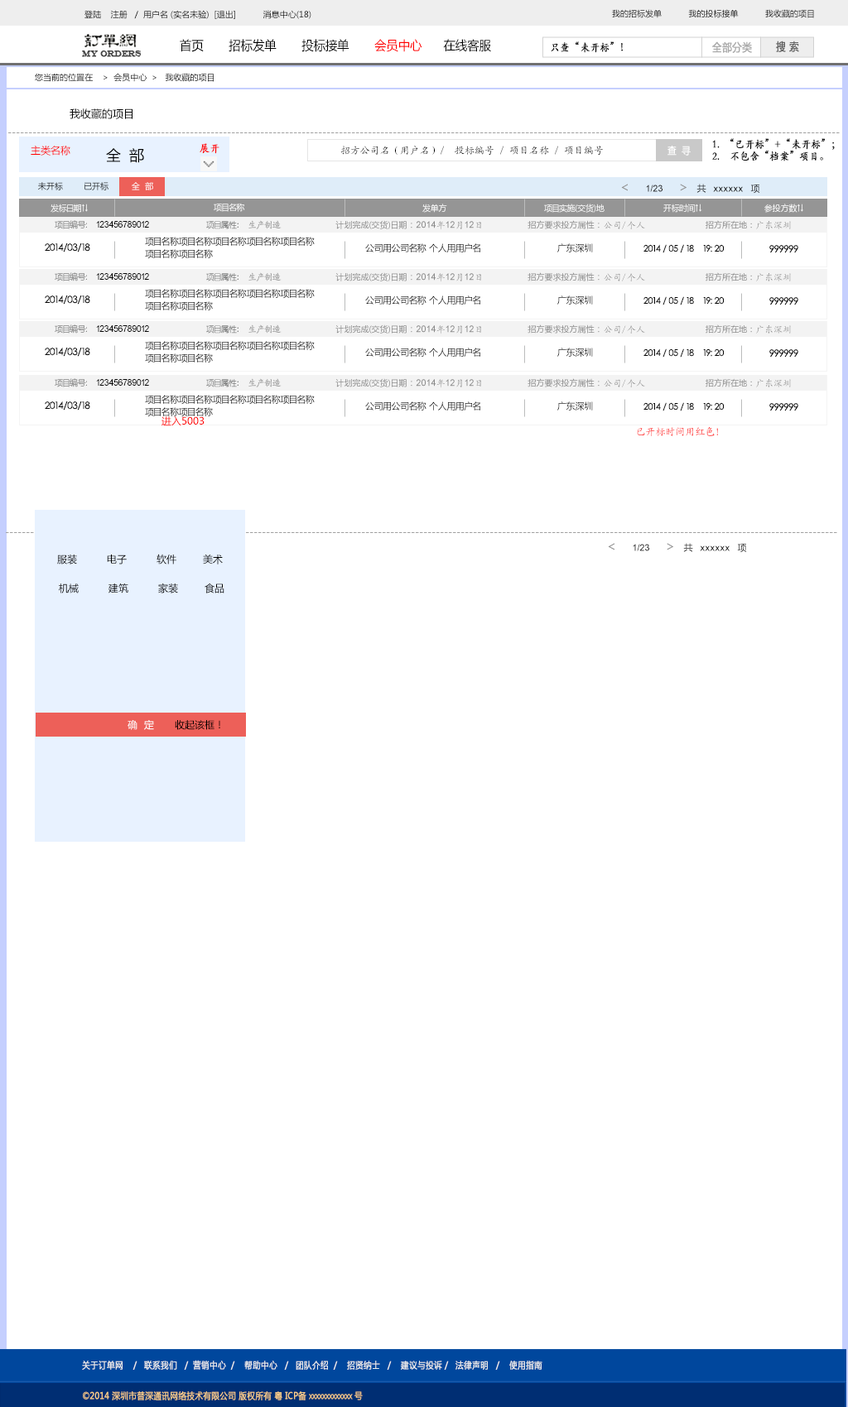
<style>
.page{position:relative;width:848px;height:1407px;background:#ffffff}
.page>*{position:absolute;margin:0}
.t1{font:8.3px "MicrosoftYaHei";color:#000000}
.t2{font:12.7px "MicrosoftYaHei";color:#000000;font-variant:small-caps;scale:0.94 1}
.t3{font:12.7px "MicrosoftYaHei";color:#ff0000;font-variant:small-caps;scale:0.94 1}
.t4{font:10.9px "STKaiti";color:#000000;font-variant:small-caps;font-weight:bold;scale:0.86 1}
.t5{font:10.9px "MicrosoftYaHei";color:#aaaaaa;font-variant:small-caps;font-weight:bold;scale:0.86 1}
.t6{font:10.9px "MicrosoftYaHei";color:#626262;font-variant:small-caps;font-weight:bold;scale:0.86 1}
.t7{font:8.2px "EngraversMT";color:#434343;font-variant:small-caps;font-weight:bold;scale:0.86 1}
.t8{font:10.8px "MicrosoftYaHei";color:#000000}
.t9{font:9.9px "MicrosoftYaHei";color:#a0a0a0}
.t10{font:9.9px "MicrosoftYaHei";color:#ff0000}
.t11{font:14.9px "MicrosoftYaHei";color:#000000}
.t12{font:10.9px "STKaiti";color:#ff0000;font-variant:small-caps;font-weight:bold;scale:0.86 1}
.t13{font:9.9px "KaiTi_GB2312";color:#000000}
.t14{font:10px "MicrosoftYaHei";color:#ffffff;font-variant:small-caps;font-weight:bold;scale:0.86 1}
.t15{font:8.3px "MicrosoftYaHei"}
.t16{font:8.4px "MicrosoftYaHei"}
.t17{font:9.1px "ArialMT"}
.t18{font:13.2px "MicrosoftYaHei"}
.t19{font:9.1px "MicrosoftYaHei"}
.t20{font:8.3px "MicrosoftYaHei";color:#ffffff}
.t21{font:9.1px "ArialMT";color:#000000}
.t22{font:8.3px "MicrosoftYaHei";color:#7a7b7b}
.t23{font:8.3px "YouYuan";color:#7a7b7b}
.t24{font:9.1px "YouYuan";color:#7a7b7b}
.t25{font:9.1px "STKaiti";color:#a0a0a0}
.t26{font:8.3px "MicrosoftYaHei";color:#898989}
.t27{font:9.1px "MicrosoftYaHei";color:#898989}
.t28{font:9.1px "ArialMT";color:#898989}
.t29{font:9.1px "STKaiti";color:#898989}
.t30{font:9.9px "STXihei";color:#040404}
.t31{font:13.2px "STXihei";color:#020202}
.t32{font:9.1px/12.4px "MicrosoftYaHei";color:#040404}
.t33{font:9.1px "MicrosoftYaHei";color:#040404}
.t34{font:9.1px "STXihei";color:#040404}
.t35{font:13.2px "STXihei";color:#040404}
.t36{font:9.9px "KaiTi_GB2312"}
.t37{font:9.9px "MicrosoftYaHei";color:#000000}
.t38{font:9.9px "MicrosoftYaHei";color:#ffffff}
.t39{font:9.1px "MicrosoftYaHei";color:#eeeeee;font-variant:small-caps;font-weight:bold;scale:0.86 1}
.t40{font:12.7px "STXihei";color:#eeeeee;font-variant:small-caps;font-weight:bold;scale:0.86 1}
.t41{font:9.1px "MicrosoftYaHei";color:#facd89;font-variant:small-caps;font-weight:bold;scale:0.87 1}
.t42{font:9.1px "MicrosoftYaHei";color:#eeeeee;font-variant:small-caps;font-weight:bold;scale:0.87 1}
</style>
<div class="page">
<p class="t1" style="left:84px;top:10px;width:227px;height:9px">登陆    注册   /  用户名 (实名未验)  [退出]           消息中心(18)</p>
<p class="t1" style="left:612px;top:9px;width:202px;height:9px">我的招标发单           我的投标接单           我收藏的项目</p>
<p class="t2" style="left:180px;top:39px;width:311px;height:13px">首页       招标发单       投标接单       <span class="t3">会员中心 </span>     在线客服</p>
<p class="t4" style="left:550px;top:41px;width:72px;height:12px">只查“未开标”！</p>
<p class="t5" style="left:712px;top:41px;width:39px;height:12px">全部分类</p>
<p class="t6" style="left:776px;top:41px;width:23px;height:11px">搜 索</p>
<p class="t7" style="left:82px;top:50px;width:60px;height:7px">MY ORDERS</p>
<p class="t1" style="left:35px;top:73px;width:179px;height:9px">您当前的位置在    &gt;  会员中心  &gt;   我收藏的项目</p>
<p class="t8" style="left:70px;top:108px;width:62px;height:11px">我收藏的项目</p>
<p class="t9" style="left:8px;top:132px;width:831px;height:1px">---------------------------------------------------------------------------------------------------------------------------------------------------------------------------------------------------------</p>
<p class="t10" style="left:31px;top:146px;width:39px;height:10px">主类名称</p>
<p class="t11" style="left:106px;top:148px;width:38px;height:15px">全  部</p>
<p class="t12" style="left:199px;top:143px;width:20px;height:11px">展开</p>
<p class="t13" style="left:340px;top:146px;width:263px;height:10px">招方公司名（用户名）/  投标编号 / 项目名称 / 项目编号</p>
<p class="t14" style="left:667px;top:146px;width:23px;height:10px">查  寻</p>
<p class="t4" style="left:712px;top:138px;width:122px;height:23px">1.  “已开标”+“未开标”；<br>2.    不包含“档案”项目。</p>
<p class="t15" style="left:38px;top:182px;width:25px;height:8px">未开标</p>
<p class="t16" style="left:84px;top:182px;width:24px;height:8px">已开标</p>
<p class="t16" style="left:132px;top:182px;width:21px;height:8px">全  部</p>
<p class="t17" style="left:621px;top:184px;width:139px;height:10px"><span class="t18">&lt;     </span>1/23     <span class="t18">&gt;  </span><span class="t19">共  </span>xxxxxx  <span class="t19">项</span></p>
<p class="t20" style="left:50px;top:204px;width:38px;height:9px">发标日期↑↓</p>
<p class="t20" style="left:214px;top:203px;width:31px;height:9px">项目名称</p>
<p class="t20" style="left:422px;top:204px;width:25px;height:9px">发单方</p>
<p class="t20" style="left:544px;top:204px;width:60px;height:9px">项目实施(交货)地</p>
<p class="t20" style="left:663px;top:204px;width:39px;height:9px">开标时间↑↓</p>
<p class="t20" style="left:764px;top:204px;width:39px;height:9px">参投方数↑↓</p>
<p class="t21" style="left:55px;top:220px;width:94px;height:9px"><span class="t22">项目编号:  </span>123456789012</p>
<p class="t23" style="left:206px;top:220px;width:75px;height:9px">项目属性<span class="t24">:  </span><span class="t25">生产制造</span></p>
<p class="t26" style="left:335px;top:220px;width:146px;height:10px">计划完成(交货)日期<span class="t27">：</span><span class="t28">2014</span><span class="t29">年</span><span class="t28">12</span><span class="t29">月</span><span class="t28">12</span><span class="t29">日</span></p>
<p class="t26" style="left:527px;top:220px;width:118px;height:9px">招方要求投方属性<span class="t27">：</span><span class="t29">公司/个人</span></p>
<p class="t26" style="left:705px;top:220px;width:85px;height:9px">招方所在地：<span class="t29">广东深圳</span></p>
<p class="t30" style="left:45px;top:243px;width:45px;height:9px"><span class="t31">   </span>2014/03/18</p>
<p class="t32" style="left:145px;top:237px;width:170px;height:22px">项目名称项目名称项目名称项目名称项目名称<br>项目名称项目名称</p>
<p class="t33" style="left:365px;top:243px;width:115px;height:9px">公司用公司名称 个人用用户名</p>
<p class="t33" style="left:557px;top:243px;width:36px;height:9px">广东深圳</p>
<p class="t34" style="left:643px;top:244px;width:80px;height:9px"><span class="t35"> </span>2014 / 05 / 18    19: 20</p>
<p class="t30" style="left:769px;top:245px;width:29px;height:8px"><span class="t35"> </span>999999</p>
<p class="t21" style="left:55px;top:272px;width:94px;height:9px"><span class="t22">项目编号:  </span>123456789012</p>
<p class="t23" style="left:206px;top:272px;width:75px;height:9px">项目属性<span class="t24">:  </span><span class="t25">生产制造</span></p>
<p class="t26" style="left:335px;top:272px;width:146px;height:10px">计划完成(交货)日期<span class="t27">：</span><span class="t28">2014</span><span class="t29">年</span><span class="t28">12</span><span class="t29">月</span><span class="t28">12</span><span class="t29">日</span></p>
<p class="t26" style="left:527px;top:272px;width:118px;height:9px">招方要求投方属性<span class="t27">：</span><span class="t29">公司/个人</span></p>
<p class="t26" style="left:705px;top:272px;width:85px;height:9px">招方所在地：<span class="t29">广东深圳</span></p>
<p class="t32" style="left:145px;top:289px;width:170px;height:22px">项目名称项目名称项目名称项目名称项目名称<br>项目名称项目名称</p>
<p class="t30" style="left:45px;top:295px;width:45px;height:10px"><span class="t31">   </span>2014/03/18</p>
<p class="t33" style="left:365px;top:295px;width:115px;height:10px">公司用公司名称 个人用用户名</p>
<p class="t33" style="left:557px;top:295px;width:36px;height:10px">广东深圳</p>
<p class="t34" style="left:643px;top:296px;width:80px;height:9px"><span class="t35"> </span>2014 / 05 / 18    19: 20</p>
<p class="t30" style="left:769px;top:297px;width:29px;height:8px"><span class="t35"> </span>999999</p>
<p class="t21" style="left:55px;top:324px;width:94px;height:10px"><span class="t22">项目编号:  </span>123456789012</p>
<p class="t23" style="left:206px;top:324px;width:75px;height:10px">项目属性<span class="t24">:  </span><span class="t25">生产制造</span></p>
<p class="t26" style="left:335px;top:324px;width:146px;height:10px">计划完成(交货)日期<span class="t27">：</span><span class="t28">2014</span><span class="t29">年</span><span class="t28">12</span><span class="t29">月</span><span class="t28">12</span><span class="t29">日</span></p>
<p class="t26" style="left:527px;top:324px;width:118px;height:10px">招方要求投方属性<span class="t27">：</span><span class="t29">公司/个人</span></p>
<p class="t26" style="left:705px;top:324px;width:85px;height:10px">招方所在地：<span class="t29">广东深圳</span></p>
<p class="t32" style="left:145px;top:341px;width:170px;height:22px">项目名称项目名称项目名称项目名称项目名称<br>项目名称项目名称</p>
<p class="t30" style="left:45px;top:348px;width:45px;height:9px"><span class="t31">   </span>2014/03/18</p>
<p class="t33" style="left:365px;top:348px;width:115px;height:9px">公司用公司名称 个人用用户名</p>
<p class="t33" style="left:557px;top:348px;width:36px;height:9px">广东深圳</p>
<p class="t34" style="left:643px;top:348px;width:80px;height:10px"><span class="t35"> </span>2014 / 05 / 18    19: 20</p>
<p class="t30" style="left:769px;top:349px;width:29px;height:9px"><span class="t35"> </span>999999</p>
<p class="t21" style="left:55px;top:378px;width:94px;height:9px"><span class="t22">项目编号:  </span>123456789012</p>
<p class="t23" style="left:206px;top:378px;width:75px;height:9px">项目属性<span class="t24">:  </span><span class="t25">生产制造</span></p>
<p class="t26" style="left:335px;top:378px;width:146px;height:10px">计划完成(交货)日期<span class="t27">：</span><span class="t28">2014</span><span class="t29">年</span><span class="t28">12</span><span class="t29">月</span><span class="t28">12</span><span class="t29">日</span></p>
<p class="t26" style="left:527px;top:378px;width:118px;height:9px">招方要求投方属性<span class="t27">：</span><span class="t29">公司/个人</span></p>
<p class="t26" style="left:705px;top:378px;width:85px;height:9px">招方所在地：<span class="t29">广东深圳</span></p>
<p class="t30" style="left:45px;top:401px;width:45px;height:10px"><span class="t31">   </span>2014/03/18</p>
<p class="t32" style="left:145px;top:395px;width:170px;height:22px">项目名称项目名称项目名称项目名称项目名称<br>项目名称项目名称</p>
<p class="t33" style="left:365px;top:401px;width:115px;height:10px">公司用公司名称 个人用用户名</p>
<p class="t33" style="left:557px;top:401px;width:36px;height:10px">广东深圳</p>
<p class="t34" style="left:643px;top:402px;width:80px;height:9px"><span class="t35"> </span>2014 / 05 / 18    19: 20</p>
<p class="t30" style="left:769px;top:403px;width:29px;height:8px"><span class="t35"> </span>999999</p>
<p class="t10" style="left:161px;top:416px;width:43px;height:10px">进入5003</p>
<p class="t36" style="left:636px;top:427px;width:82px;height:9px">已开标时间用红色！</p>
<p class="t9" style="left:6px;top:532px;width:831px;height:1px">---------------------------------------------------------------------------------------------------------------------------------------------------------------------------------------------------------</p>
<p class="t17" style="left:607px;top:543px;width:140px;height:10px"><span class="t18">&lt;     </span>1/23     <span class="t18">&gt;  </span><span class="t19">共  </span>xxxxxx  <span class="t19">项</span></p>
<p class="t37" style="left:57px;top:554px;width:166px;height:10px">服装         电子         软件        美术</p>
<p class="t37" style="left:59px;top:583px;width:165px;height:10px">机械         建筑         家装        食品</p>
<p class="t38" style="left:127px;top:720px;width:27px;height:10px">确  定</p>
<p class="t37" style="left:175px;top:720px;width:45px;height:10px">收起该框！</p>
<p class="t39" style="left:82px;top:1360px;width:460px;height:10px"><span class="t40"><br><br></span>关于订单网    /   联系我们   /  营销中心  /    帮助中心   /   团队介绍  /    招贤纳士   /    建议与投诉 /   法律声明   /    使用指南</p>
<p class="t41" style="left:83px;top:1391px;width:280px;height:9px"><span class="t42"> </span>©2014 深圳市普深通讯网络技术有限公司 版权所有 粤 ICP备 xxxxxxxxxxxxx 号</p>
</div>
